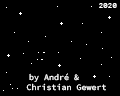
<style>
.page{position:relative;width:120px;height:96px;background:#000000}
.page>*{position:absolute;margin:0}
.t1{font:8.3px "Consolas";color:#ffffff}
.t2{font:8.3px "SourceCodePro-Regular";color:#ffffff}
</style>
<div class="page">
<p class="t1" style="left:99px;top:3px;width:18px;height:5px">2020</p>
<p class="t2" style="left:26px;top:73px;width:80px;height:18px;text-align:center">by André &amp;<br>     Christian Gewert</p>
</div>
